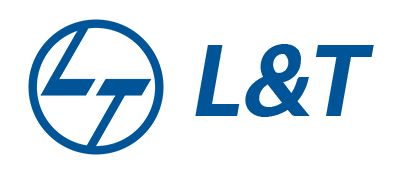
<style>
.page{position:relative;width:400px;height:173px;background:#ffffff}
.page>*{position:absolute;margin:0}
.t1{font:96.7px "Lato-Heavy";color:#005498;font-style:italic}
</style>
<div class="page">
<p class="t1" style="left:195px;top:44px;width:179px;height:73px">L&amp;T</p>
</div>
